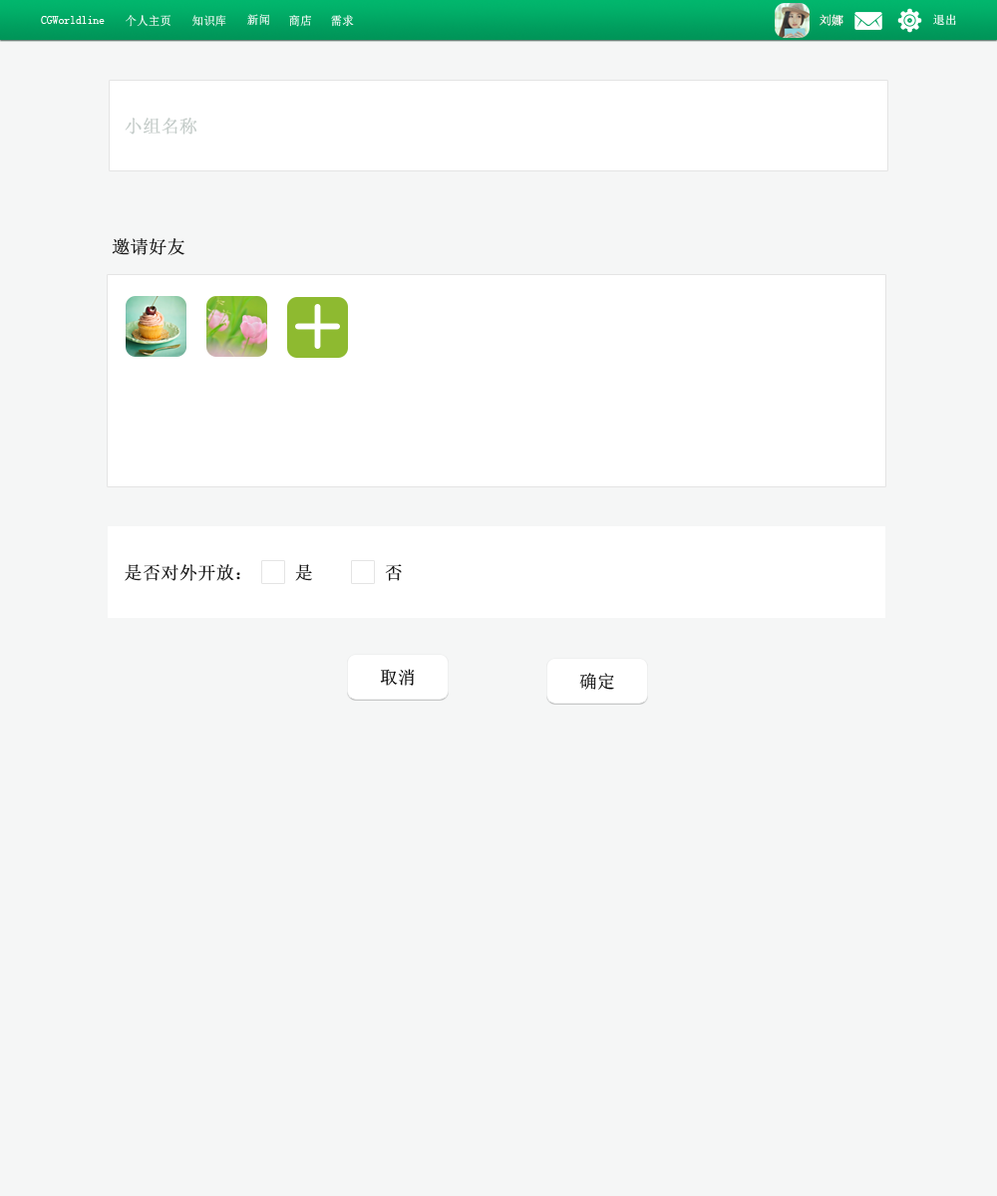
<style>
.page{position:relative;width:997px;height:1196px;background:#f5f6f6}
.page>*{position:absolute;margin:0}
.t1{font:12px "SimSun";color:#fdfcfc;scale:0.97 1}
.t2{font:12px "SimSun";scale:0.97 1}
.t3{font:12px "SimSun";color:#fdfbfb}
.t4{font:12px "SimSun";color:#ffffff}
.t5{font:17.9px "SimSun";color:#c4ccc9;font-weight:bold}
.t6{font:17.9px "SimSun";color:#191919;font-weight:bold}
.t7{font:17.9px "SimSun";color:#020202}
</style>
<div class="page">
<p class="t1" style="left:41px;top:16px;width:64px;height:8px">CGWorldline</p>
<p class="t2" style="left:126px;top:15px;width:44px;height:12px">个人主页</p>
<p class="t2" style="left:192px;top:15px;width:34px;height:12px">知识库</p>
<p class="t2" style="left:247px;top:14px;width:22px;height:12px">新闻</p>
<p class="t2" style="left:289px;top:15px;width:22px;height:12px">商店</p>
<p class="t2" style="left:331px;top:15px;width:23px;height:12px">需求</p>
<p class="t3" style="left:819px;top:14px;width:24px;height:12px">刘娜</p>
<p class="t4" style="left:933px;top:14px;width:23px;height:11px">退出</p>
<p class="t5" style="left:125px;top:118px;width:72px;height:17px">小组名称</p>
<p class="t6" style="left:112px;top:238px;width:73px;height:17px">邀请好友</p>
<p class="t6" style="left:125px;top:564px;width:115px;height:17px">是否对外开放：</p>
<p class="t6" style="left:295px;top:564px;width:17px;height:17px">是</p>
<p class="t6" style="left:385px;top:564px;width:17px;height:17px">否</p>
<p class="t7" style="left:380px;top:669px;width:35px;height:17px">取消</p>
<p class="t7" style="left:579px;top:673px;width:35px;height:17px">确定</p>
</div>
